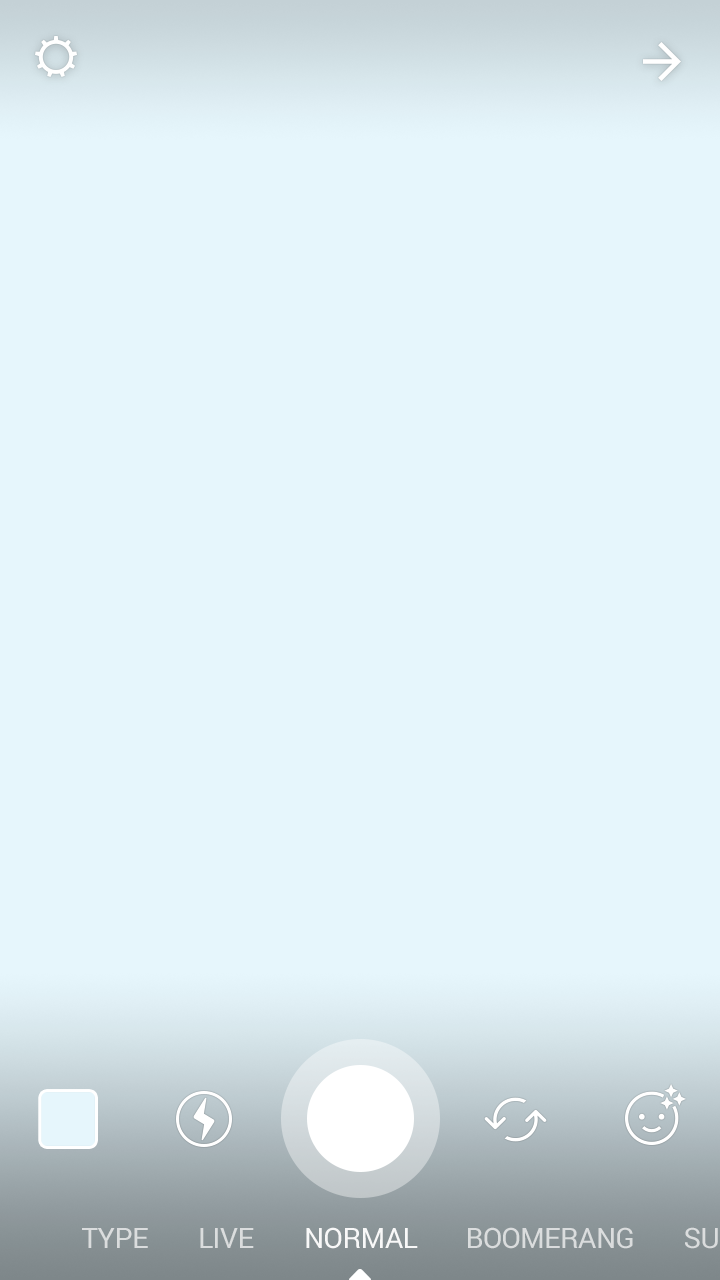
<style>
.page{position:relative;width:720px;height:1280px;background:#e6f6fc}
.page>*{position:absolute;margin:0}
.t1{font:28px "Roboto-Regular";letter-spacing:-0.02em;color:#dadddd}
.t2{font:28px "Roboto-Regular";letter-spacing:-0.02em;color:#f8f8f8}
</style>
<div class="page">
<p class="t1" style="left:82px;top:1228px;width:66px;height:20px">TYPE</p>
<p class="t1" style="left:200px;top:1228px;width:54px;height:20px">LIVE</p>
<p class="t2" style="left:306px;top:1227px;width:112px;height:22px">NORMAL</p>
<p class="t1" style="left:468px;top:1227px;width:165px;height:22px">BOOMERANG</p>
</div>
